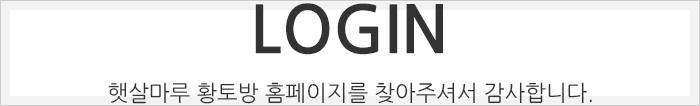
<style>
.page{position:relative;width:700px;height:106px;background:#ffffff}
.page>*{position:absolute;margin:0}
.t1{font:65px "NanumGothicBold";color:#333333}
.t2{font:22px "NanumGothic";color:#333333}
</style>
<div class="page">
<p class="t1" style="left:255px;top:3px;width:188px;height:52px">LOGIN</p>
<p class="t2" style="left:108px;top:82px;width:484px;height:22px">햇살마루 황토방 홈페이지를 찾아주셔서 감사합니다.</p>
</div>
